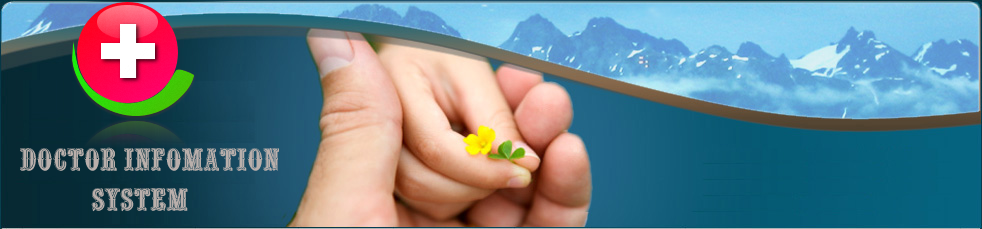
<style>
.page{position:relative;width:982px;height:229px}
.page>*{position:absolute;margin:0}
.t1{font:30px/20px "VNI-Silver";color:#b9afab}
</style>
<div class="page">
<p class="t1" style="left:20px;top:147px;width:259px;height:65px">Doctor Infomation    <br>  System</p>
</div>
